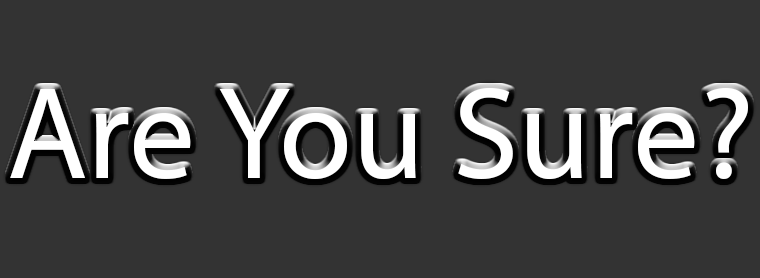
<style>
.page{position:relative;width:760px;height:278px;background:#333333}
.page>*{position:absolute;margin:0}
.t1{font:132.4px "MyriadPro-Regular";color:#ffffff}
</style>
<div class="page">
<p class="t1" style="left:10px;top:88px;width:738px;height:92px">Are You Sure?</p>
</div>
